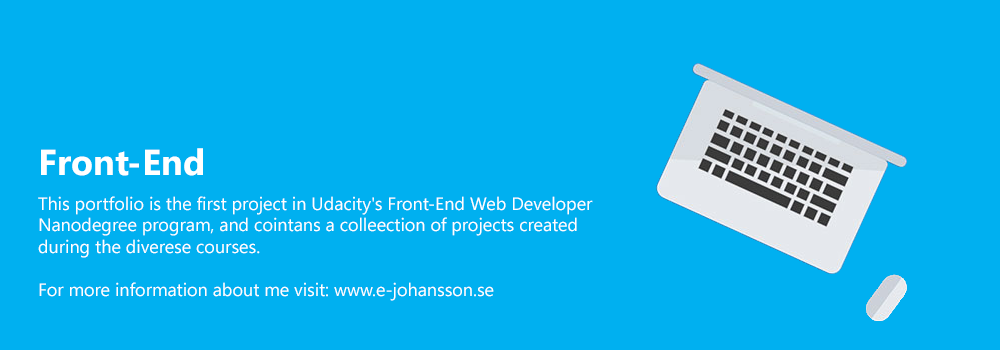
<style>
.page{position:relative;width:1000px;height:350px;background:#00b0f0}
.page>*{position:absolute;margin:0}
.t1{font:36px "SegoeUI-Bold";color:#ffffff}
.t2{font:18px "SegoeUI";color:#ffffff}
</style>
<div class="page">
<p class="t1" style="left:41px;top:148px;width:162px;height:28px">Front-End</p>
<p class="t2" style="left:38px;top:196px;width:555px;height:105px">This portfolio is the first project in Udacity's Front-End Web Developer Nanodegree program, and cointans a colleection of projects created during the diverese courses.<br><br>For more information about me visit: www.e-johansson.se</p>
</div>
